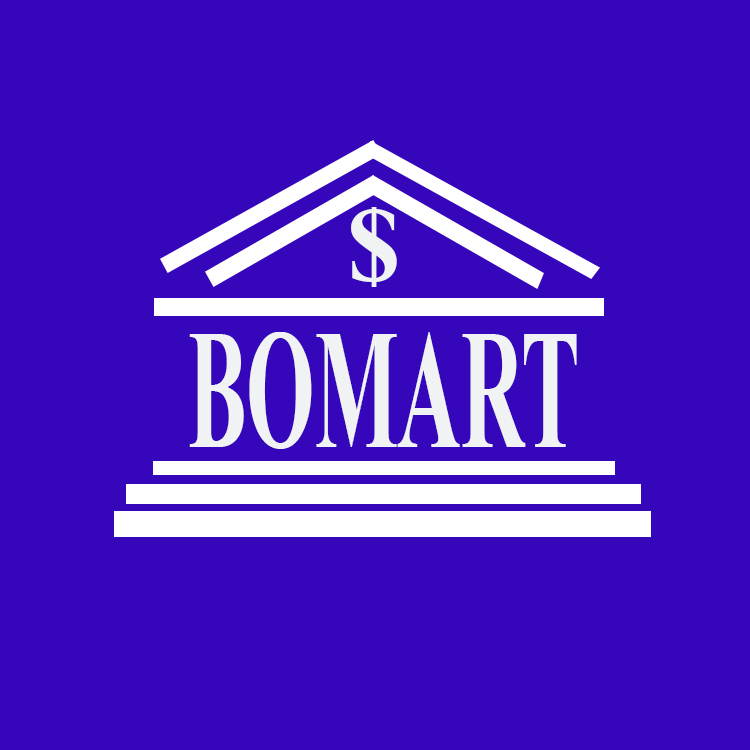
<style>
.page{position:relative;width:750px;height:750px;background:#3607ba}
.page>*{position:absolute;margin:0}
.t1{font:107px "TimesNewRomanPS-BoldMT";color:#f0f2f3}
.t2{font:169.7px "TimesNewRomanPS-BoldMT";color:#f0f2f3;scale:0.52 1}
</style>
<div class="page">
<p class="t1" style="left:351px;top:207px;width:46px;height:80px">$</p>
<p class="t2" style="left:189px;top:332px;width:388px;height:117px">BOMART</p>
</div>
